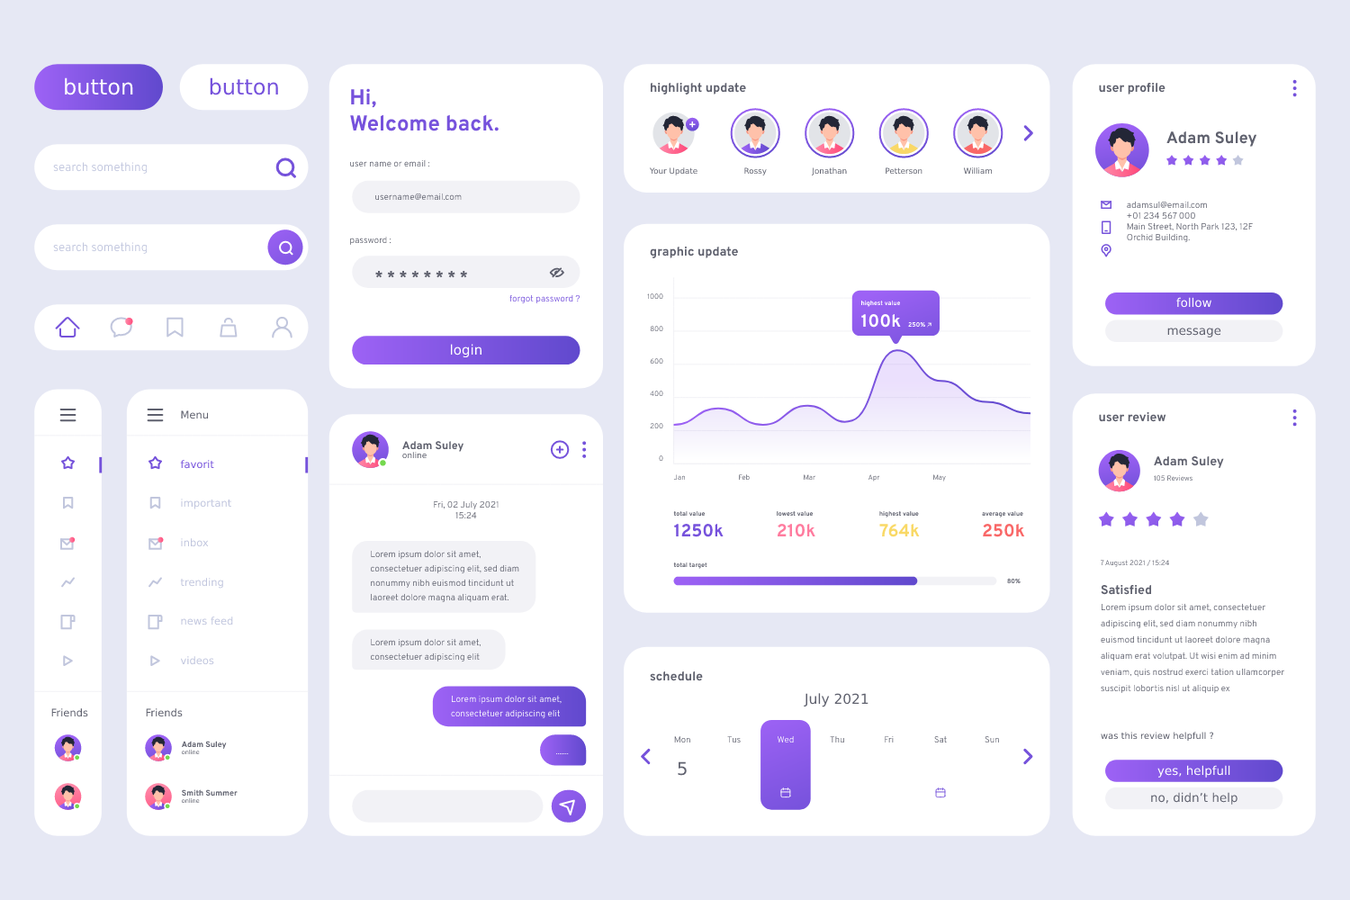
<style>
.page{position:relative;width:1350px;height:900px;background:#ffffff}
.page>*{position:absolute;margin:0}
.t1{font:21.6px "Overpass-Reg";color:#ffffff}
.t2{font:21.6px "Overpass-Reg";color:#7652dc}
.t3{font:21.6px "Overpass-Bold";color:#7652dc}
.t4{font:12.6px "Overpass-Bold";color:#5f616e}
.t5{font:16.3px "Overpass-Bold";color:#5f616e}
.t6{font:9px "Overpass-Light";color:#5f616e}
.t7{font:12.1px "Overpass-Light";color:#c1c6de}
.t8{font:7.9px "Overpass-Reg";color:#5f616e}
.t9{font:7.9px "Overpass-Reg"}
.t10{font:15.1px "Overpass-Bold";color:#5f616e}
.t11{font:7.2px/32.4px "Overpass-Light"}
.t12{font:9px "Overpass-Light";color:#7652dc}
.t13{font:6.3px "Overpass-Bold";color:#ffffff}
.t14{font:12.1px "Overpass-Reg";color:#ffffff}
.t15{font:17.6px "Overpass-Bold";color:#ffffff}
.t16{font:12.1px "Overpass-Reg";color:#5f616e}
.t17{font:13.5px "Overpass-Reg";color:#ffffff}
.t18{font:10.3px "Overpass-Reg";color:#5f616e}
.t19{font:11.1px "Overpass-Bold";color:#5f616e}
.t20{font:10.3px/39.3px "Overpass-Reg";color:#c1c6de}
.t21{font:10.3px/39.3px "Overpass-Reg";color:#7652dc}
.t22{font:8.1px "Overpass-Reg"}
.t23{font:7.2px "Overpass-Light";color:#5f616e}
.t24{font:7.2px "Overpass-Light"}
.t25{font:6.3px "Overpass-Bold";color:#5f616e}
.t26{font:6.3px "Overpass-Bold"}
.t27{font:17.6px "Overpass-Bold";color:#7652dc}
.t28{font:17.6px "Overpass-Bold";color:#ff7c9f}
.t29{font:17.6px "Overpass-Bold";color:#f9d967}
.t30{font:17.6px "Overpass-Bold";color:#f96767}
.t31{font:9px/14.4px "Overpass-Light";color:#5f616e}
.t32{font:9px/16.2px "Overpass-Light";color:#5f616e}
.t33{font:12.6px/38px "Overpass-Bold";color:#5f616e}
.t34{font:9px/14.4px "Overpass-Light";color:#ffffff}
.t35{font:13.8px "Overpass-Reg";color:#5f616e}
.t36{font:8.8px "Overpass-Light";color:#5f616e}
.t37{font:8.8px "Overpass-Light"}
.t38{font:8.8px "Overpass-Light";color:#ffffff}
.t39{font:9px "Overpass-Reg";color:#5f616e}
.t40{font:8.1px "Overpass-Bold";color:#5f616e}
.t41{font:5.9px "Overpass-Reg"}
.t42{font:9px "Overpass-Light";color:#ffffff}
.t43{font:17.6px "Overpass-Reg";color:#5f616e}
</style>
<div class="page">
<p class="t1" style="left:65px;top:77px;width:68px;height:18px">button</p>
<p class="t2" style="left:210px;top:77px;width:68px;height:18px">button</p>
<p class="t3" style="left:350px;top:88px;width:149px;height:43px">Hi,<br>Welcome back.</p>
<p class="t4" style="left:651px;top:82px;width:95px;height:12px">highlight update</p>
<p class="t4" style="left:1099px;top:82px;width:67px;height:12px">user profile</p>
<p class="t5" style="left:1166px;top:130px;width:91px;height:17px">Adam Suley</p>
<p class="t6" style="left:350px;top:159px;width:80px;height:8px">user name or email :</p>
<p class="t7" style="left:53px;top:162px;width:95px;height:12px">search something</p>
<p class="t8" style="left:649px;top:167px;width:49px;height:9px">Your Update</p>
<p class="t8" style="left:744px;top:167px;width:23px;height:9px">Rossy</p>
<p class="t8" style="left:811px;top:167px;width:36px;height:9px">Jonathan</p>
<p class="t9" style="left:886px;top:167px;width:36px;height:8px">Petterson</p>
<p class="t8" style="left:963px;top:167px;width:30px;height:8px">William</p>
<p class="t6" style="left:375px;top:193px;width:87px;height:8px">username@email.com</p>
<p class="t6" style="left:1127px;top:201px;width:126px;height:42px">adamsul@email.com<br>+01 234 567 000<br>Main Street, North Park 123, 12F Orchid Building.</p>
<p class="t7" style="left:53px;top:242px;width:95px;height:12px">search something</p>
<p class="t6" style="left:350px;top:236px;width:42px;height:10px">password :</p>
<p class="t4" style="left:650px;top:246px;width:88px;height:12px">graphic update</p>
<p class="t10" style="left:375px;top:270px;width:92px;height:8px">* * * * * * * *</p>
<p class="t11" style="left:647px;top:293px;width:16px;height:169px;text-align:right">1000<br>800<br>600<br>400<br>200<br>0</p>
<p class="t12" style="left:509px;top:294px;width:71px;height:10px">forgot password ?</p>
<p class="t13" style="left:861px;top:300px;width:40px;height:7px">highest value</p>
<p class="t14" style="left:1176px;top:297px;width:35px;height:11px">follow</p>
<p class="t15" style="left:861px;top:313px;width:40px;height:15px">100k</p>
<p class="t13" style="left:908px;top:321px;width:17px;height:7px">250%</p>
<p class="t16" style="left:1167px;top:328px;width:54px;height:10px">message</p>
<p class="t17" style="left:450px;top:344px;width:32px;height:14px">login</p>
<p class="t18" style="left:181px;top:410px;width:28px;height:9px">Menu</p>
<p class="t4" style="left:1099px;top:411px;width:67px;height:11px">user review</p>
<p class="t19" style="left:402px;top:441px;width:62px;height:11px">Adam Suley</p>
<p class="t20" style="left:180px;top:460px;width:53px;height:205px"><span class="t21">favorit<br></span>important<br>inbox<br>trending<br>news feed<br>videos</p>
<p class="t22" style="left:402px;top:452px;width:25px;height:7px">online</p>
<p class="t4" style="left:1154px;top:455px;width:70px;height:13px">Adam Suley</p>
<p class="t23" style="left:673px;top:474px;width:273px;height:8px">Jan  Feb Mar Apr May Jun Jul Aug Sep</p>
<p class="t24" style="left:1154px;top:475px;width:38px;height:7px">105 Reviews</p>
<p class="t6" style="left:434px;top:500px;width:65px;height:19px;text-align:center">Fri, 02 July 2021<br>15:24</p>
<p class="t25" style="left:673px;top:510px;width:33px;height:7px">total value</p>
<p class="t25" style="left:777px;top:510px;width:37px;height:7px">lowest value</p>
<p class="t26" style="left:879px;top:510px;width:40px;height:8px">highest value</p>
<p class="t25" style="left:982px;top:510px;width:41px;height:8px">average value</p>
<p class="t27" style="left:674px;top:523px;width:50px;height:14px">1250k</p>
<p class="t28" style="left:777px;top:523px;width:38px;height:14px">210k</p>
<p class="t29" style="left:879px;top:523px;width:41px;height:14px">764k</p>
<p class="t30" style="left:983px;top:523px;width:42px;height:14px">250k</p>
<p class="t31" style="left:370px;top:550px;width:149px;height:53px">Lorem ipsum dolor sit amet, consectetuer adipiscing elit, sed diam nonummy nibh euismod tincidunt ut laoreet dolore magna aliquam erat.</p>
<p class="t26" style="left:673px;top:562px;width:34px;height:7px">total target</p>
<p class="t24" style="left:1100px;top:560px;width:69px;height:7px">7 August 2021 / 15:24</p>
<p class="t26" style="left:1007px;top:578px;width:14px;height:6px">80%</p>
<p class="t32" style="left:1101px;top:584px;width:184px;height:110px"><span class="t33">Satisfied<br></span>Lorem ipsum dolor sit amet, consectetuer adipiscing elit, sed diam nonummy nibh euismod tincidunt ut laoreet dolore magna aliquam erat volutpat. Ut wisi enim ad minim veniam, quis nostrud exerci tation ullamcorper suscipit lobortis nisl ut aliquip ex</p>
<p class="t31" style="left:370px;top:638px;width:111px;height:24px">Lorem ipsum dolor sit amet, consectetuer adipiscing elit</p>
<p class="t4" style="left:650px;top:670px;width:53px;height:11px">schedule</p>
<p class="t34" style="left:451px;top:695px;width:111px;height:24px">Lorem ipsum dolor sit amet, consectetuer adipiscing elit</p>
<p class="t35" style="left:804px;top:693px;width:64px;height:14px">July 2021</p>
<p class="t18" style="left:51px;top:708px;width:37px;height:9px">Friends</p>
<p class="t18" style="left:146px;top:708px;width:37px;height:9px">Friends</p>
<p class="t36" style="left:674px;top:736px;width:16px;height:7px">Mon</p>
<p class="t37" style="left:727px;top:736px;width:14px;height:7px">Tus</p>
<p class="t38" style="left:778px;top:735px;width:16px;height:8px">Wed</p>
<p class="t37" style="left:830px;top:735px;width:14px;height:8px">Thu</p>
<p class="t37" style="left:885px;top:736px;width:9px;height:6px">Fri</p>
<p class="t36" style="left:934px;top:735px;width:13px;height:8px">Sat</p>
<p class="t37" style="left:985px;top:736px;width:14px;height:7px">Sun</p>
<p class="t39" style="left:1101px;top:732px;width:113px;height:10px">was this review helpfull ?</p>
<p class="t40" style="left:181px;top:741px;width:46px;height:8px">Adam Suley</p>
<p class="t41" style="left:182px;top:750px;width:18px;height:5px">online</p>
<p class="t42" style="left:555px;top:753px;width:14px;height:2px">.......</p>
<p class="t43" style="left:678px;top:761px;width:9px;height:15px">5</p>
<p class="t14" style="left:1157px;top:765px;width:73px;height:13px">yes, helpfull</p>
<p class="t40" style="left:182px;top:789px;width:56px;height:7px">Smith Summer</p>
<p class="t16" style="left:1151px;top:792px;width:87px;height:13px">no, didn’t help</p>
<p class="t41" style="left:182px;top:798px;width:18px;height:6px">online</p>
</div>
